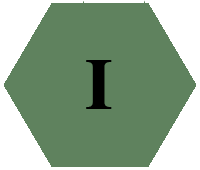
<style>
.page{position:relative;width:200px;height:170px;background:#5f825e}
.page>*{position:absolute;margin:0}
.t1{font:72px "Times-Bold";color:#000000}
</style>
<div class="page">
<p class="t1" style="left:86px;top:60px;width:26px;height:49px">I</p>
</div>
